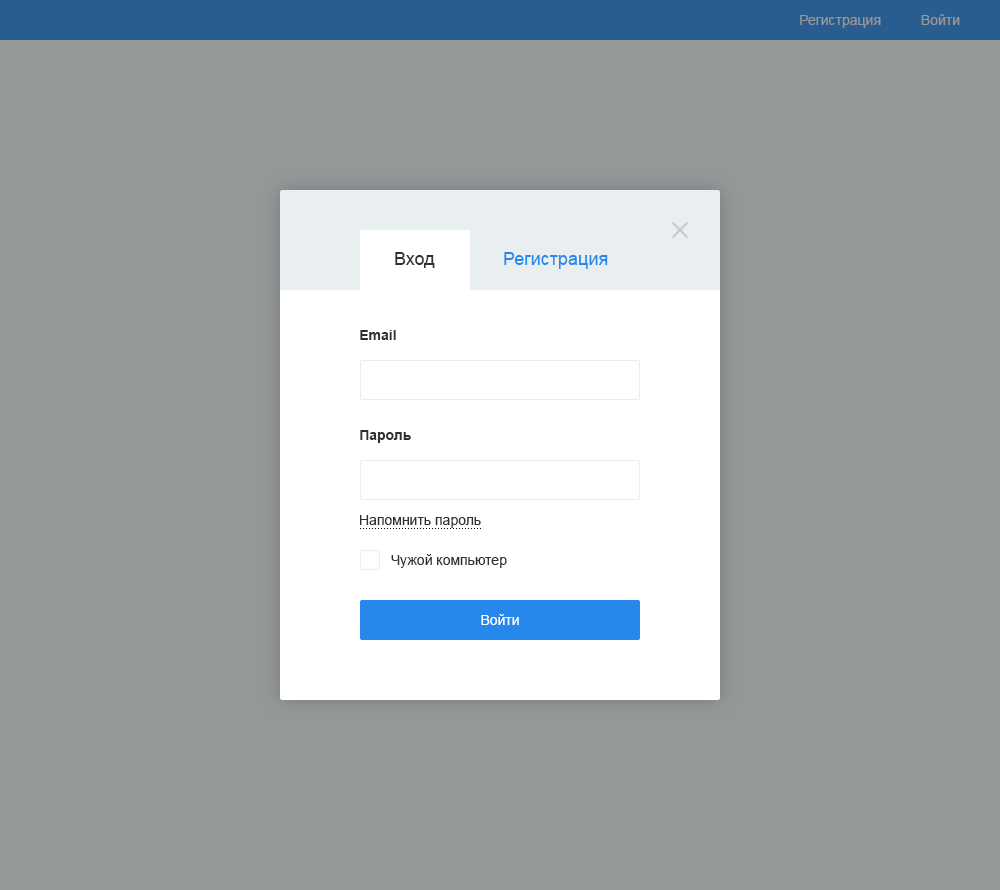
<style>
.page{position:relative;width:1000px;height:890px;background:#959899}
.page>*{position:absolute;margin:0}
.t1{font:14px "ArialMT";color:#959899}
.t2{font:18px "ArialMT";color:#2c3133}
.t3{font:18px "ArialMT";color:#2688eb}
.t4{font:14px "Arial-BoldMT";color:#2c3133}
.t5{font:14px "ArialMT";color:#2c3133}
.t6{font:14px "ArialMT";color:#ffffff}
</style>
<div class="page">
<p class="t1" style="left:800px;top:15px;width:81px;height:13px">Регистрация</p>
<p class="t1" style="left:921px;top:14px;width:39px;height:11px">Войти</p>
<p class="t2" style="left:395px;top:252px;width:40px;height:16px">Вход</p>
<p class="t3" style="left:504px;top:252px;width:104px;height:17px">Регистрация</p>
<p class="t4" style="left:360px;top:330px;width:36px;height:10px">Email</p>
<p class="t4" style="left:360px;top:430px;width:51px;height:13px">Пароль</p>
<p class="t5" style="left:360px;top:515px;width:121px;height:13px">Напомнить пароль</p>
<p class="t5" style="left:391px;top:554px;width:116px;height:14px">Чужой компьютер</p>
<p class="t6" style="left:481px;top:614px;width:38px;height:11px">Войти</p>
</div>
